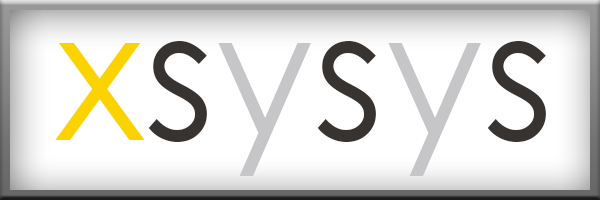
<style>
.page{position:relative;width:600px;height:200px;background:#ffffff}
.page>*{position:absolute;margin:0}
.t1{font:183.3px "CenturyGothic";color:#fad300}
.t2{font:183.3px "CenturyGothic";color:#373330}
.t3{font:183.3px "CenturyGothic";color:#c6c5c7}
</style>
<div class="page">
<p class="t1" style="left:55px;top:41px;width:491px;height:135px">x<span class="t2">s</span><span class="t3">y</span><span class="t2">s</span><span class="t3">y</span><span class="t2">s</span></p>
</div>
